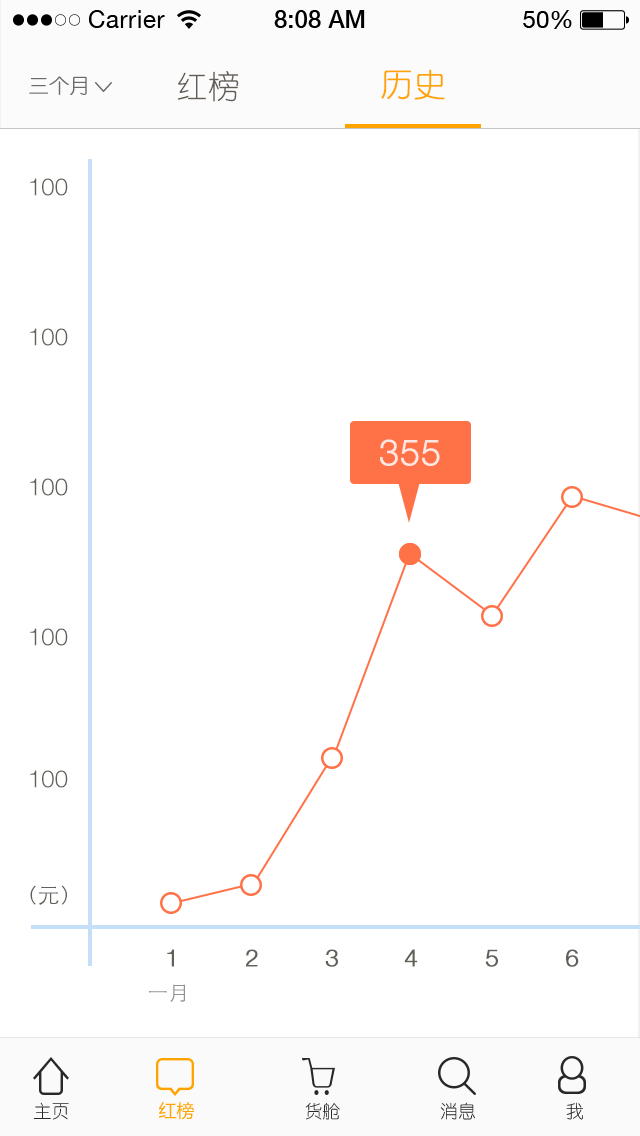
<style>
.page{position:relative;width:640px;height:1136px;background:#ffffff}
.page>*{position:absolute;margin:0}
.t1{font:20px "YouYuan";color:#6c6b6b;text-transform:uppercase;font-weight:bold}
.t2{font:32px "YouYuan";color:#615d56;text-transform:uppercase}
.t3{font:32px "YouYuan";color:#ffa300;text-transform:uppercase;font-weight:bold}
.t4{font:24px "HelveticaNeueLTPro-Lt";color:#625e58;text-transform:uppercase}
.t5{font:36px "HelveticaNeueLTPro-Lt";color:#ffe7e2;text-transform:uppercase;font-weight:bold}
.t6{font:22px "STHeitiSC-Light";color:#625e58;text-transform:uppercase}
.t7{font:24px "HelveticaNeueLTPro-Lt";color:#625e58;text-transform:uppercase;font-weight:bold}
.t8{font:20px "STHeitiSC-Light";color:#93918d;text-transform:uppercase}
.t9{font:18px "YouYuan";color:#282828;text-transform:uppercase}
.t10{font:18px "MicrosoftYaHei";color:#ffa300;text-transform:uppercase}
</style>
<div class="page">
<p class="t1" style="left:29px;top:76px;width:58px;height:19px">三个月</p>
<p class="t2" style="left:177px;top:71px;width:62px;height:31px">红榜</p>
<p class="t3" style="left:381px;top:69px;width:64px;height:31px">历史</p>
<p class="t4" style="left:30px;top:178px;width:38px;height:18px">100</p>
<p class="t4" style="left:30px;top:328px;width:38px;height:18px">100</p>
<p class="t5" style="left:380px;top:439px;width:60px;height:27px">355</p>
<p class="t4" style="left:30px;top:478px;width:38px;height:18px">100</p>
<p class="t4" style="left:30px;top:628px;width:38px;height:18px">100</p>
<p class="t4" style="left:30px;top:770px;width:38px;height:18px">100</p>
<p class="t6" style="left:30px;top:885px;width:37px;height:20px">（元）</p>
<p class="t7" style="left:167px;top:949px;width:7px;height:18px">1</p>
<p class="t7" style="left:245px;top:949px;width:13px;height:18px">2</p>
<p class="t7" style="left:325px;top:949px;width:13px;height:18px">3</p>
<p class="t7" style="left:404px;top:949px;width:14px;height:18px">4</p>
<p class="t7" style="left:485px;top:949px;width:13px;height:18px">5</p>
<p class="t7" style="left:566px;top:949px;width:13px;height:18px">6</p>
<p class="t8" style="left:149px;top:984px;width:36px;height:18px">一月</p>
<p class="t9" style="left:34px;top:1102px;width:35px;height:18px">主页</p>
<p class="t10" style="left:158px;top:1102px;width:36px;height:18px">红榜</p>
<p class="t9" style="left:305px;top:1102px;width:35px;height:18px">货舱</p>
<p class="t9" style="left:440px;top:1102px;width:35px;height:18px">消息</p>
<p class="t9" style="left:566px;top:1102px;width:17px;height:18px">我</p>
</div>
